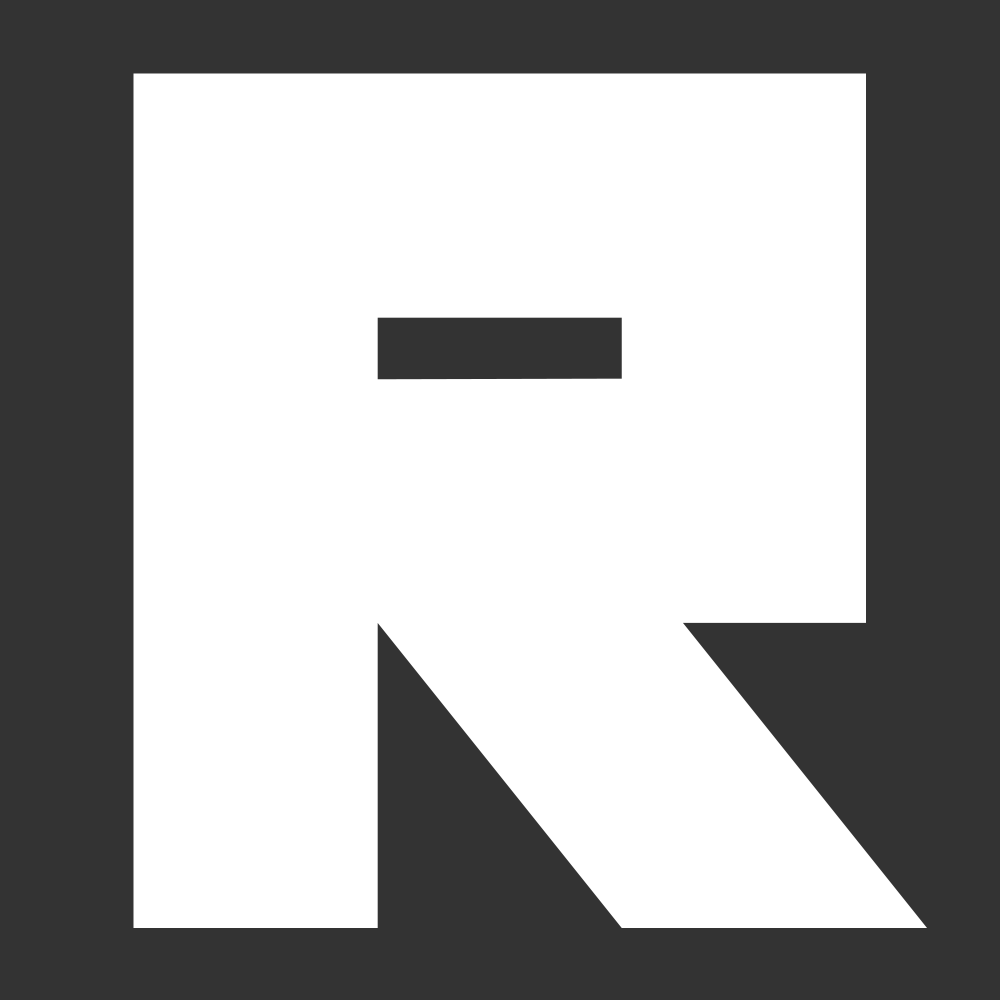
<style>
.page{position:relative;width:1000px;height:1000px;background:#ffffff}
.page>*{position:absolute;margin:0}
.t1{font:1250px "NeonOverdrive";letter-spacing:0.01em;color:#ffffff}
</style>
<div class="page">
<p class="t1" style="left:133px;top:73px;width:794px;height:855px">R</p>
</div>
